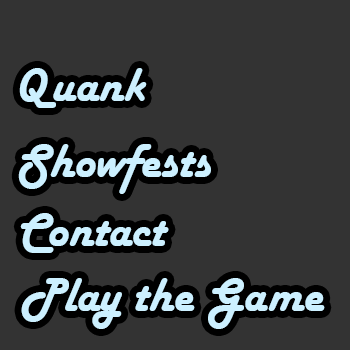
<style>
.page{position:relative;width:350px;height:350px;background:#333333}
.page>*{position:absolute;margin:0}
.t1{font:50px "HarlowSolid";color:#ccf0ff}
</style>
<div class="page">
<p class="t1" style="left:19px;top:68px;width:128px;height:40px">Quank</p>
<p class="t1" style="left:18px;top:144px;width:193px;height:50px">Showfests</p>
<p class="t1" style="left:20px;top:213px;width:149px;height:40px">Contact</p>
<p class="t1" style="left:21px;top:278px;width:304px;height:51px">Play the Game</p>
</div>
